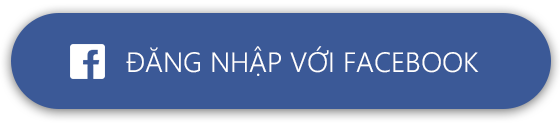
<style>
.page{position:relative;width:560px;height:124px;background:#3b5997}
.page>*{position:absolute;margin:0}
.t1{font:28px "SegoeUI-Semilight";color:#ffffff;text-transform:uppercase}
</style>
<div class="page">
<p class="t1" style="left:126px;top:46px;width:353px;height:30px">đĂng nhập với facebook</p>
</div>
